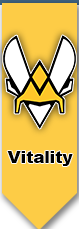
<style>
.page{position:relative;width:79px;height:229px;background:#fdcc46}
.page>*{position:absolute;margin:0}
.t1{font:16.7px "Arial-Black";letter-spacing:-0.01em;color:#000000}
</style>
<div class="page">
<p class="t1" style="left:7px;top:151px;width:66px;height:15px">Vitality</p>
</div>
